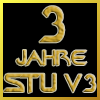
<style>
.page{position:relative;width:100px;height:100px;background:#000000}
.page>*{position:absolute;margin:0}
.t1{font:60px "FederationDS9Title"}
.t2{font:24px "FederationDS9Title"}
.t3{font:48px "FederationDS9Title"}
.t4{font:29px "FederationDS9Title"}
.t5{font:12px "FederationDS9Title"}
</style>
<div class="page">
<p class="t1" style="left:39px;top:6px;width:26px;height:37px">3</p>
<p class="t2" style="left:16px;top:50px;width:71px;height:16px"><span class="t3"><br><br></span>Jahre</p>
<p class="t4" style="left:3px;top:73px;width:93px;height:20px"><span class="t5"><br></span>STU v3</p>
</div>
